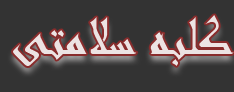
<style>
.page{position:relative;width:234px;height:92px;background:#333333}
.page>*{position:absolute;margin:0}
.t1{font:60px "Andalus";color:#ece3e3}
</style>
<div class="page">
<p class="t1" style="left:13px;top:15px;width:221px;height:51px">کلبه سلامتی</p>
</div>
